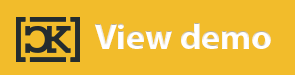
<style>
.page{position:relative;width:295px;height:75px;background:#f2bc2b}
.page>*{position:absolute;margin:0}
.t1{font:36px "MyriadPro-Bold";color:#ffffff}
</style>
<div class="page">
<p class="t1" style="left:94px;top:23px;width:177px;height:26px">View demo</p>
</div>
